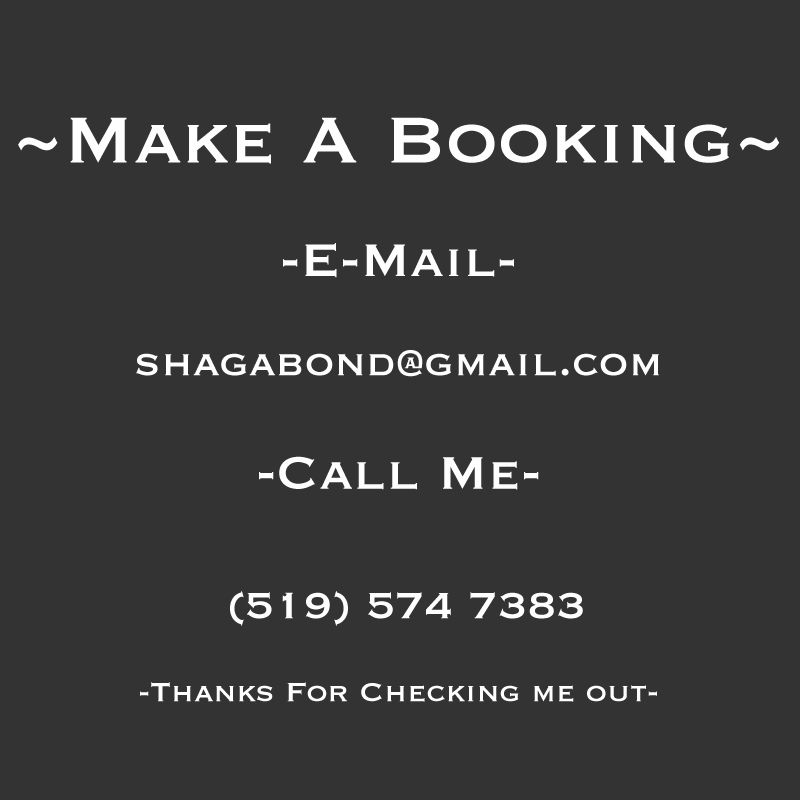
<style>
.page{position:relative;width:800px;height:800px;background:#333333}
.page>*{position:absolute;margin:0}
.t1{font:34.6px "Copperplate";color:#fefefe}
.t2{font:85px "Copperplate";color:#fefefe}
.t3{font:60px "Copperplate";color:#fefefe}
.t4{font:48px "Copperplate";color:#fefefe}
</style>
<div class="page">
<p class="t1" style="left:18px;top:117px;width:762px;height:585px;text-align:center"><span class="t2">~Make A Booking~<br><br></span><span class="t3">-E-Mail-<br><br></span><span class="t4">shagabond@gmail.com<br><br></span><span class="t3">-Call Me-<br><br></span><span class="t4"> (519) 574 7383<br></span><br>-Thanks For Checking me out-</p>
</div>
